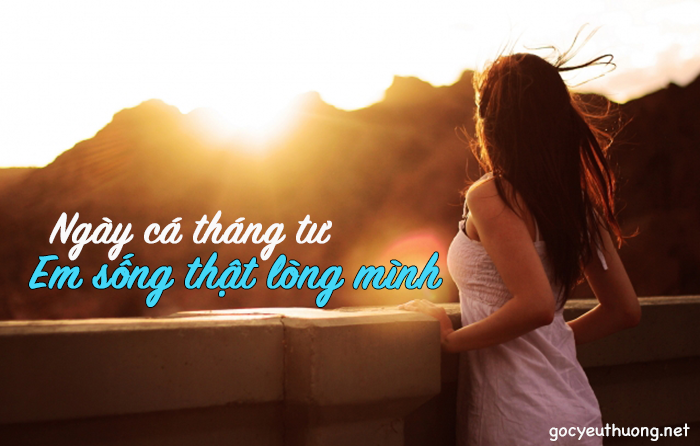
<style>
.page{position:relative;width:700px;height:446px}
.page>*{position:absolute;margin:0}
.t1{font:47.7px "SignPainter-HouseScript";color:#f9f9f9;font-weight:bold}
.t2{font:51.9px "SignPainter-HouseScript";color:#44d7f7;font-weight:bold}
.t3{font:18px "ChalkboardSE-Regular";color:#f9f9f9}
</style>
<div class="page">
<p class="t1" style="left:49px;top:210px;width:283px;height:51px">Ngày cá tháng tư</p>
<p class="t2" style="left:29px;top:252px;width:413px;height:55px">Em sống thật lòng mình</p>
<p class="t3" style="left:549px;top:423px;width:141px;height:18px">gocyeuthuong.net</p>
</div>
